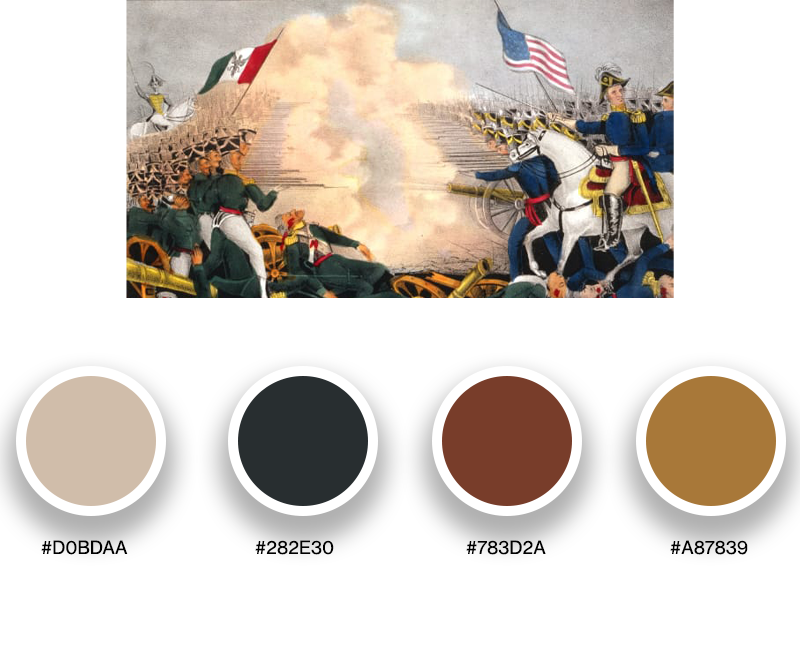
<style>
.page{position:relative;width:800px;height:650px;background:#ffffff}
.page>*{position:absolute;margin:0}
.t1{font:18px "NeueHaasGroteskTextPro";color:#000000}
</style>
<div class="page">
<p class="t1" style="left:41px;top:540px;width:87px;height:15px">#D0BDAA</p>
<p class="t1" style="left:255px;top:540px;width:79px;height:15px">#282E30</p>
<p class="t1" style="left:466px;top:540px;width:80px;height:15px">#783D2A</p>
<p class="t1" style="left:670px;top:540px;width:78px;height:15px">#A87839</p>
</div>
